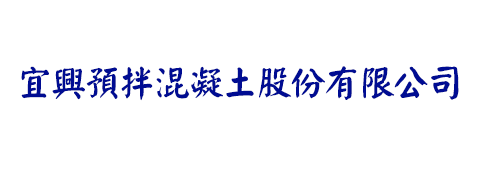
<style>
.page{position:relative;width:480px;height:170px;background:#ffffff}
.page>*{position:absolute;margin:0}
.t1{font:36px "ARYanKaiB5-Heavy";letter-spacing:-0.05em;color:#000c92}
</style>
<div class="page">
<p class="t1" style="left:21px;top:66px;width:438px;height:35px">宜興預拌混凝土股份有限公司</p>
</div>
